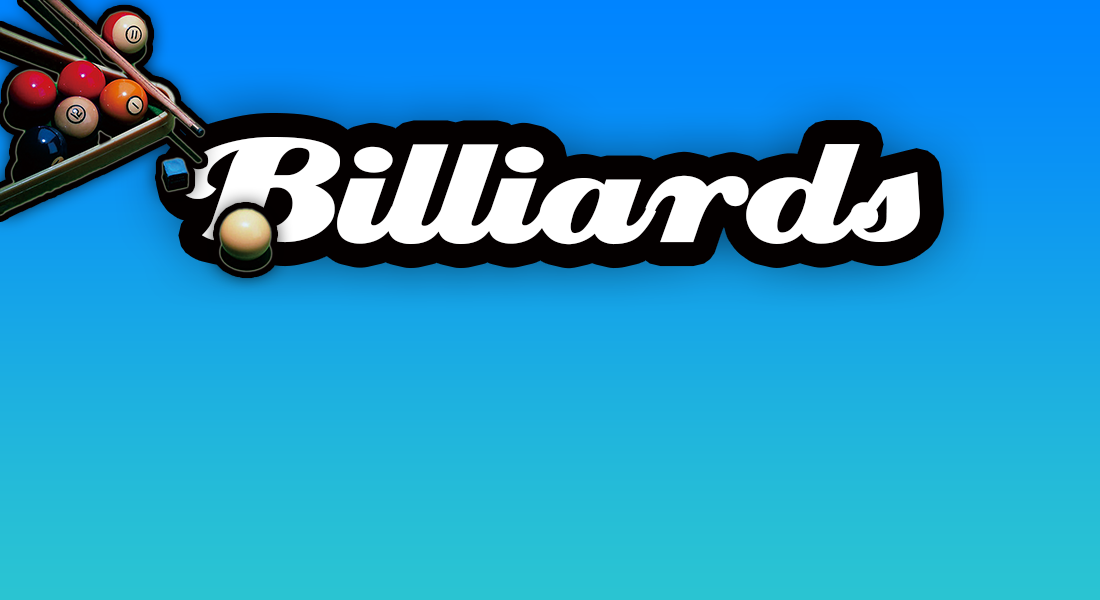
<style>
.page{position:relative;width:1100px;height:600px}
.page>*{position:absolute;margin:0}
.t1{font:178px "Creampuff";color:#ffffff}
</style>
<div class="page">
<p class="t1" style="left:180px;top:137px;width:740px;height:108px">Billiards</p>
</div>
